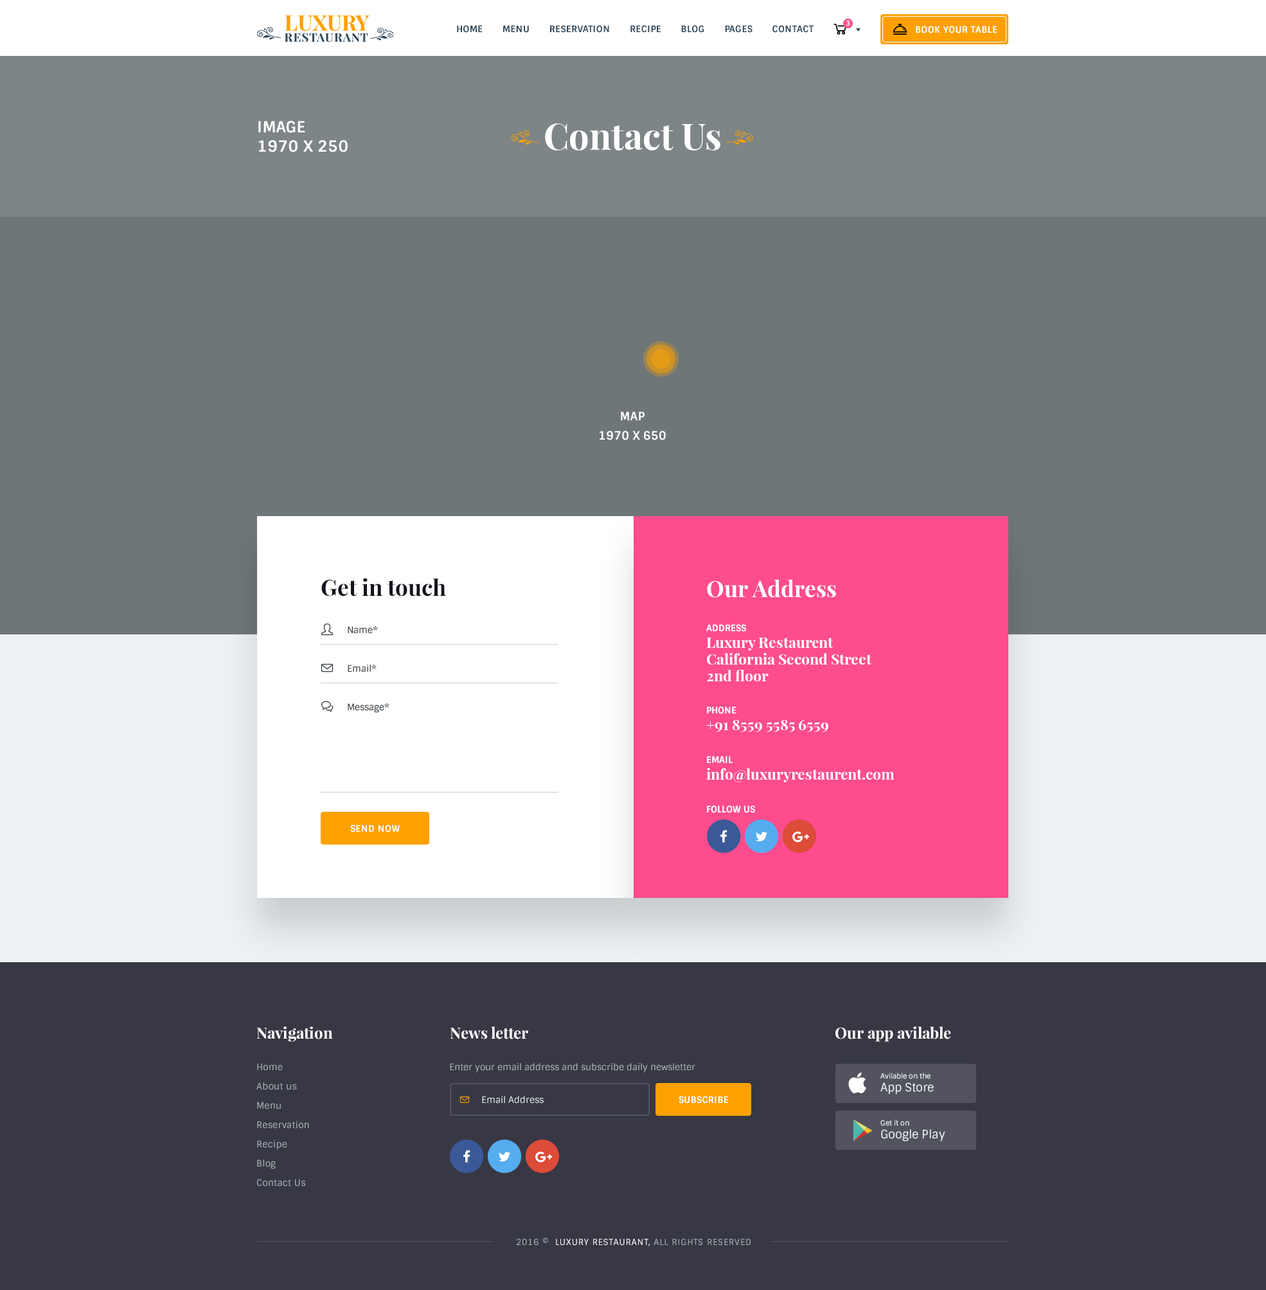
<style>
.page{position:relative;width:1266px;height:1290px;background:#6e7678}
.page>*{position:absolute;margin:0}
.t1{font:9px "Sintony-Bold";letter-spacing:0.025em;color:#2c465a;text-transform:uppercase}
.t2{font:7.1px "Sintony-Bold";letter-spacing:0.025em;color:#ffffff;text-transform:uppercase}
.t3{font:9px "Sintony-Bold";letter-spacing:0.025em;color:#ffffff;text-transform:uppercase}
.t4{font:15.4px/19.3px "Sintony-Bold";letter-spacing:0.005em;color:#ffffff;text-transform:uppercase}
.t5{font:36px "PlayfairDisplay-Bold";color:#ffffff}
.t6{font:11.6px/19.3px "Sintony-Bold";letter-spacing:0.005em;color:#ffffff;text-transform:uppercase}
.t7{font:22.5px "PlayfairDisplay-Bold";color:#14141d}
.t8{font:22.5px "PlayfairDisplay-Bold";color:#ffffff}
.t9{font:9px "Sintony";color:#363d43}
.t10{font:14.8px/16.7px "PlayfairDisplay-Bold";color:#ffffff}
.t11{font:9px/16.7px "Sintony-Bold";color:#ffffff;text-transform:uppercase}
.t12{font:9px "Sintony-Bold";color:#ffffff;text-transform:uppercase}
.t13{font:15.4px "PlayfairDisplay-Bold";color:#ffffff}
.t14{font:9px/19.3px "Sintony";letter-spacing:0.025em;color:#adb2b7}
.t15{font:9px "Sintony";color:#adb2b7}
.t16{font:7.1px/12.9px "Sintony";color:#edf1f3}
.t17{font:11.6px/12.9px "Sintony";color:#edf1f3}
.t18{font:9px "Sintony";color:#e6e9eb}
.t19{font:8.4px "Sintony";letter-spacing:0.075em;color:#adb2b7;text-transform:uppercase}
.t20{font:8.4px "Sintony";letter-spacing:0.075em;color:#ffffff;text-transform:uppercase}
</style>
<div class="page">
<p class="t1" style="left:457px;top:25px;width:357px;height:8px">Home       menu       reservation       recipe       blog       Pages       contact</p>
<p class="t2" style="left:846px;top:20px;width:5px;height:6px">3</p>
<p class="t3" style="left:916px;top:26px;width:82px;height:7px">Book your table</p>
<p class="t4" style="left:258px;top:121px;width:90px;height:31px">Image<br>1970 x 250</p>
<p class="t5" style="left:545px;top:123px;width:176px;height:27px">Contact Us</p>
<p class="t6" style="left:600px;top:411px;width:66px;height:29px;text-align:center">Map<br>1970 x 650</p>
<p class="t7" style="left:321px;top:578px;width:125px;height:19px">Get in touch</p>
<p class="t8" style="left:707px;top:579px;width:129px;height:19px">Our Address</p>
<p class="t9" style="left:348px;top:626px;width:30px;height:8px">Name*</p>
<p class="t10" style="left:706px;top:624px;width:166px;height:57px"><span class="t11">Address<br></span>Luxury Restaurent<br>California Second Street<br>2nd floor</p>
<p class="t9" style="left:348px;top:664px;width:29px;height:8px">Email*</p>
<p class="t9" style="left:348px;top:703px;width:42px;height:10px">Message*</p>
<p class="t10" style="left:706px;top:706px;width:123px;height:26px"><span class="t11">Phone<br></span>+91 8559 5585 6559</p>
<p class="t10" style="left:706px;top:756px;width:189px;height:26px"><span class="t11">Email<br></span>info@luxuryrestaurent.com</p>
<p class="t12" style="left:707px;top:806px;width:48px;height:7px">Follow us</p>
<p class="t3" style="left:350px;top:825px;width:50px;height:8px">Send now</p>
<p class="t13" style="left:256px;top:1027px;width:77px;height:15px">Navigation</p>
<p class="t13" style="left:450px;top:1027px;width:78px;height:13px">News letter</p>
<p class="t13" style="left:836px;top:1027px;width:115px;height:15px">Our app avilable</p>
<p class="t14" style="left:256px;top:1063px;width:53px;height:124px">Home<br>About us<br>Menu<br>Reservation<br>Recipe<br>Blog<br>Contact Us</p>
<p class="t15" style="left:450px;top:1063px;width:246px;height:10px">Enter your email address and subscribe daily newsletter</p>
<p class="t16" style="left:881px;top:1073px;width:53px;height:22px">Avilable on the<br><span class="t17">App Store</span></p>
<p class="t18" style="left:482px;top:1096px;width:62px;height:8px">Email Address</p>
<p class="t3" style="left:679px;top:1096px;width:49px;height:8px">Subscribe</p>
<p class="t17" style="left:881px;top:1120px;width:65px;height:22px"><span class="t16">Get it on<br></span>Google Play</p>
<p class="t19" style="left:517px;top:1238px;width:234px;height:8px">2016 ©  <span class="t20">Luxury RestaurAnt,</span> All rights reserved</p>
</div>
